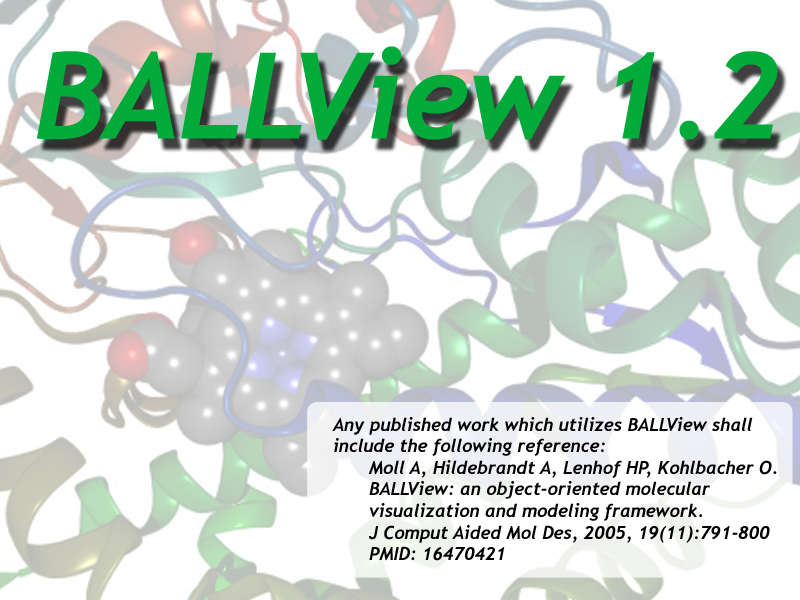
<style>
.page{position:relative;width:800px;height:600px;background:#ffffff}
.page>*{position:absolute;margin:0}
.t1{font:120px "Trebuchet-BoldItalic";color:#00ab39}
.t2{font:18px "Trebuchet-BoldItalic";color:#000000}
</style>
<div class="page">
<p class="t1" style="left:37px;top:46px;width:741px;height:94px">BALLView 1.2</p>
<p class="t2" style="left:332px;top:417px;width:445px;height:144px">Any published work which utilizes BALLView shall<br>include the following reference:<br> Moll A, Hildebrandt A, Lenhof HP, Kohlbacher O. <br> BALLView: an object-oriented molecular <br> visualization and modeling framework.<br> J Comput Aided Mol Des, 2005, 19(11):791-800<br> PMID: 16470421</p>
</div>
